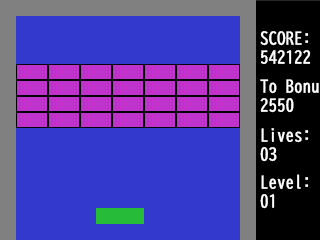
<style>
.page{position:relative;width:320px;height:240px;background:#3239cc}
.page>*{position:absolute;margin:0}
.t1{font:15.9px "BIZ-UDGothic";color:#ffffff;font-weight:bold}
</style>
<div class="page">
<p class="t1" style="left:260px;top:31px;width:51px;height:33px">SCORE:<br>542122</p>
<p class="t1" style="left:260px;top:128px;width:49px;height:34px">Lives:<br>03</p>
<p class="t1" style="left:260px;top:174px;width:49px;height:35px">Level:<br>01</p>
</div>
